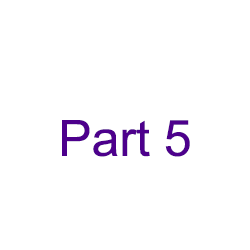
<style>
.page{position:relative;width:250px;height:250px;background:#ffffff}
.page>*{position:absolute;margin:0}
.t1{font:50px "ArialMT";color:#4d008c}
</style>
<div class="page">
<p class="t1" style="left:62px;top:120px;width:128px;height:37px">Part 5</p>
</div>
